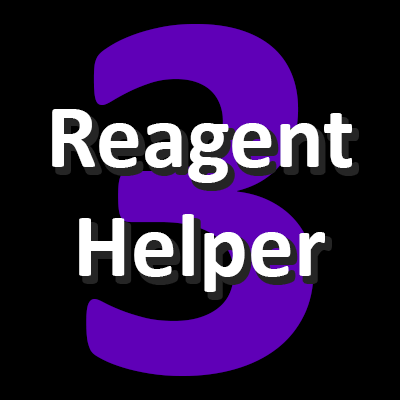
<style>
.page{position:relative;width:400px;height:400px;background:#000000}
.page>*{position:absolute;margin:0}
.t1{font:538.3px "Calibri-Bold";color:#5f00b7}
.t2{font:91.2px "Calibri-Bold";color:#ffffff}
</style>
<div class="page">
<p class="t1" style="left:86px;top:24px;width:228px;height:352px">3</p>
<p class="t2" style="left:52px;top:109px;width:300px;height:183px;text-align:center">Reagent<br>Helper</p>
</div>
